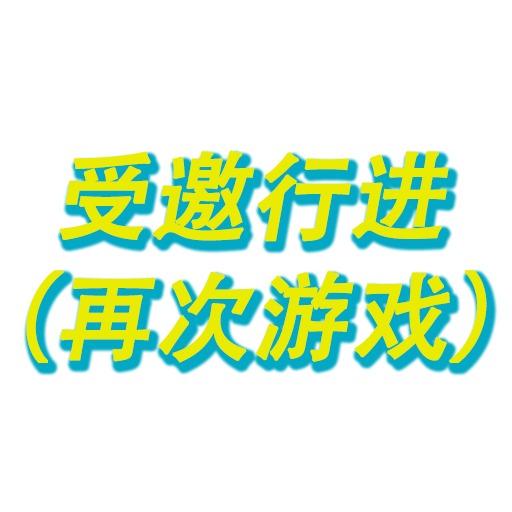
<style>
.page{position:relative;width:512px;height:512px;background:#ffffff}
.page>*{position:absolute;margin:0}
.t1{font:96px/120px "AdobeHeitiStd-Regular";color:#e9ec00;font-weight:bold;font-style:italic}
</style>
<div class="page">
<p class="t1" style="left:26px;top:150px;width:461px;height:213px">受邀行进<br>（再次游戏）</p>
</div>
